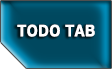
<style>
.page{position:relative;width:112px;height:69px}
.page>*{position:absolute;margin:0}
.t1{font:16.6px "PFBeauSansPro-Bold";color:#ffffff;scale:0.96 1}
</style>
<div class="page">
<p class="t1" style="left:17px;top:24px;width:78px;height:13px">TODO TAB</p>
</div>
